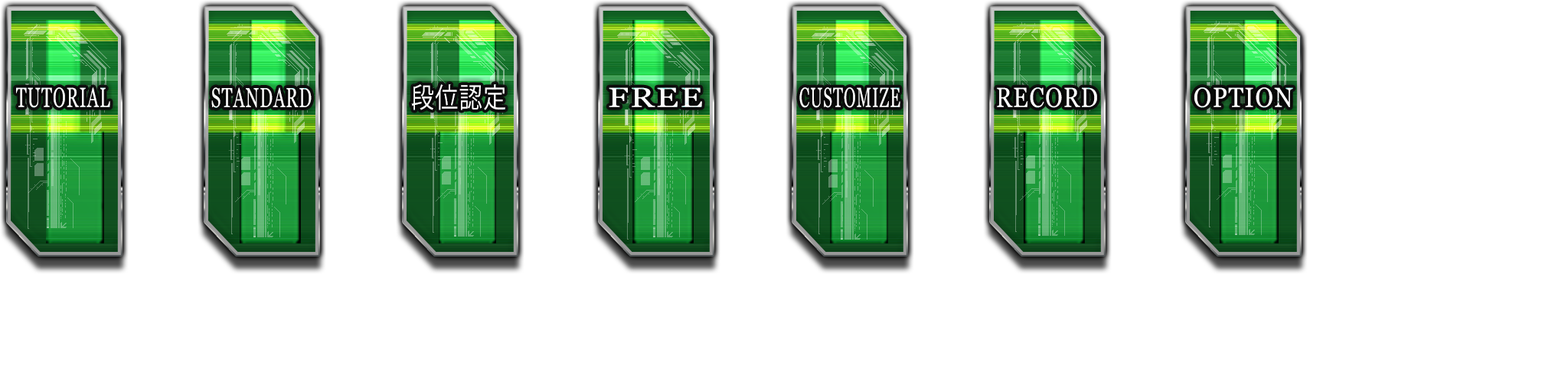
<style>
.page{position:relative;width:1568px;height:392px;background:#ffffff}
.page>*{position:absolute;margin:0}
.t1{font:27.6px "Vani";letter-spacing:0.05em;color:#ffffff;scale:0.62 1}
.t2{font:27.6px "KozGoPr6N-Regular";letter-spacing:0.05em;color:#ffffff;scale:0.83 1}
.t3{font:27.6px "Vani";letter-spacing:0.05em;color:#ffffff;scale:1.25 1}
.t4{font:27.6px "Vani";letter-spacing:0.05em;color:#ffffff;scale:0.58 1}
.t5{font:27.6px "Vani";letter-spacing:0.05em;color:#ffffff;scale:0.83 1}
.t6{font:27.6px "Vani";letter-spacing:0.05em;color:#ffffff;scale:0.88 1}
</style>
<div class="page">
<p class="t1" style="left:16px;top:87px;width:94px;height:21px">TUTORIAL</p>
<p class="t1" style="left:211px;top:87px;width:101px;height:21px">STANDARD</p>
<p class="t2" style="left:411px;top:84px;width:94px;height:26px">段位認定</p>
<p class="t3" style="left:609px;top:87px;width:93px;height:20px">FREE</p>
<p class="t4" style="left:799px;top:87px;width:101px;height:21px">CUSTOMIZE</p>
<p class="t5" style="left:997px;top:87px;width:100px;height:21px">RECORD</p>
<p class="t6" style="left:1194px;top:87px;width:99px;height:21px">OPTION</p>
</div>
